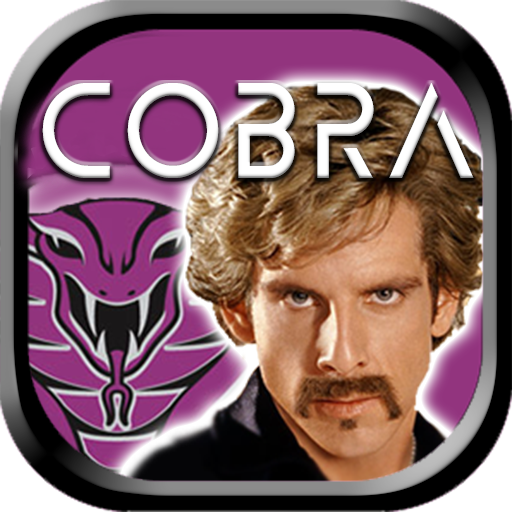
<style>
.page{position:relative;width:512px;height:512px}
.page>*{position:absolute;margin:0}
.t1{font:130.2px "ZELDA";letter-spacing:0.05em;color:#ffffff;text-transform:uppercase;scale:0.95 1}
</style>
<div class="page">
<p class="t1" style="left:42px;top:83px;width:432px;height:95px">COBRA</p>
</div>
